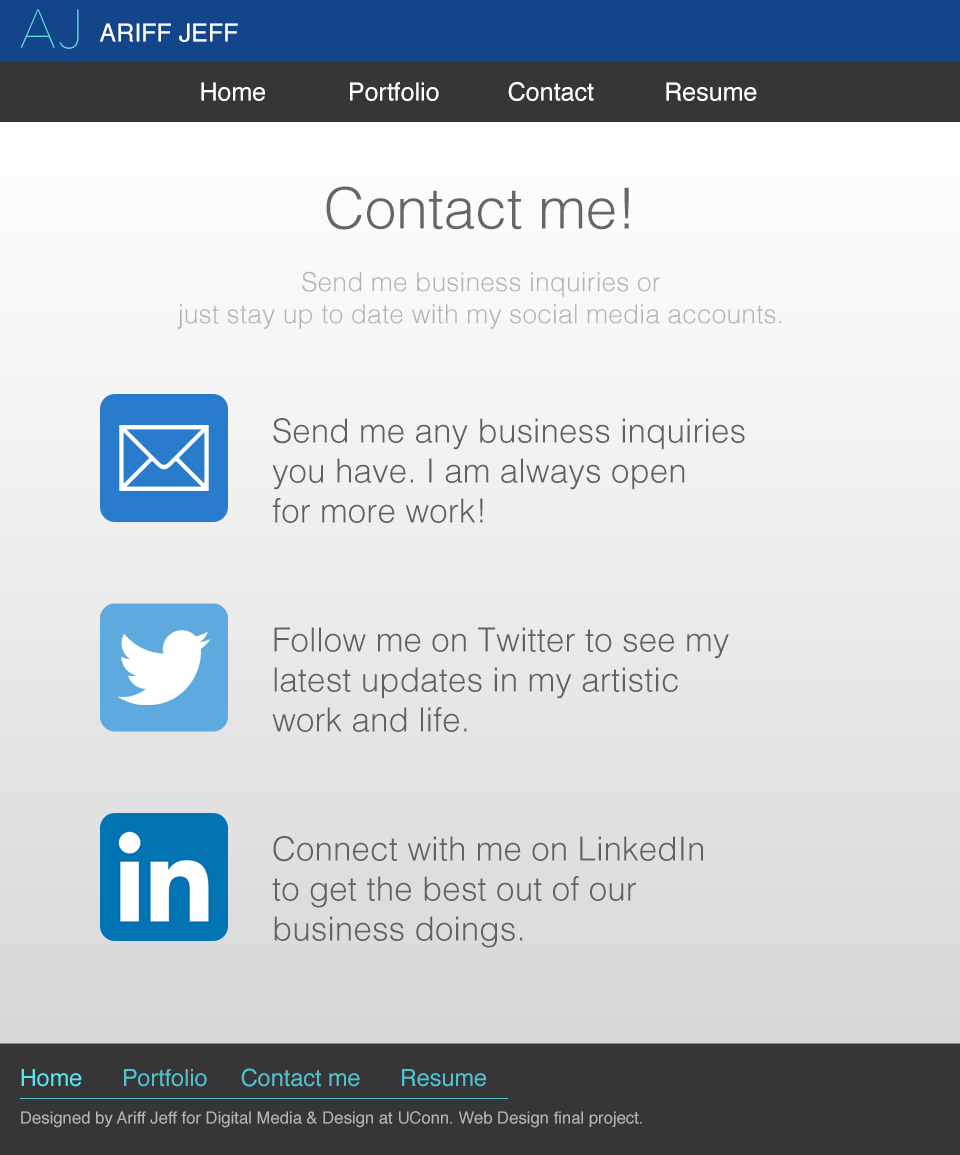
<style>
.page{position:relative;width:960px;height:1155px}
.page>*{position:absolute;margin:0}
.t1{font:54px "AvenirNext-UltraLight";letter-spacing:0.04em;color:#6cd8df}
.t2{font:25px "Helvetica";color:#ffffff}
.t3{font:56.8px "Helvetica-Light";color:#666666}
.t4{font:26.6px "Helvetica-Light";color:#b4b4b4}
.t5{font:33.3px "Helvetica-Light";color:#616161}
.t6{font:23.4px "Helvetica";color:#5fe2f1}
.t7{font:23.4px "Helvetica";color:#55c0cd}
.t8{font:16.7px "Helvetica";color:#b4b4b4}
</style>
<div class="page">
<p class="t1" style="left:20px;top:9px;width:59px;height:40px">AJ</p>
<p class="t2" style="left:100px;top:23px;width:138px;height:19px">ARIFF JEFF</p>
<p class="t2" style="left:201px;top:82px;width:64px;height:19px">Home</p>
<p class="t2" style="left:350px;top:82px;width:89px;height:19px">Portfolio</p>
<p class="t2" style="left:508px;top:82px;width:86px;height:19px">Contact</p>
<p class="t2" style="left:666px;top:82px;width:91px;height:19px">Resume</p>
<p class="t3" style="left:326px;top:186px;width:303px;height:44px">Contact me!</p>
<p class="t4" style="left:177px;top:271px;width:605px;height:58px;text-align:center">Send me business inquiries or<br>just stay up to date with my social media accounts.</p>
<p class="t5" style="left:272px;top:418px;width:473px;height:105px">Send me any business inquiries<br>you have. I am always open <br>for more work!</p>
<p class="t5" style="left:272px;top:627px;width:457px;height:105px">Follow me on Twitter to see my<br>latest updates in my artistic<br>work and life.</p>
<p class="t5" style="left:272px;top:836px;width:431px;height:112px">Connect with me on LinkedIn<br>to get the best out of our<br>business doings.</p>
<p class="t6" style="left:21px;top:1069px;width:61px;height:18px">Home</p>
<p class="t7" style="left:124px;top:1069px;width:83px;height:18px">Portfolio</p>
<p class="t7" style="left:241px;top:1068px;width:119px;height:19px">Contact me</p>
<p class="t7" style="left:402px;top:1069px;width:84px;height:18px">Resume</p>
<p class="t8" style="left:21px;top:1111px;width:621px;height:17px">Designed by Ariff Jeff for Digital Media &amp; Design at UConn. Web Design final project.</p>
</div>
